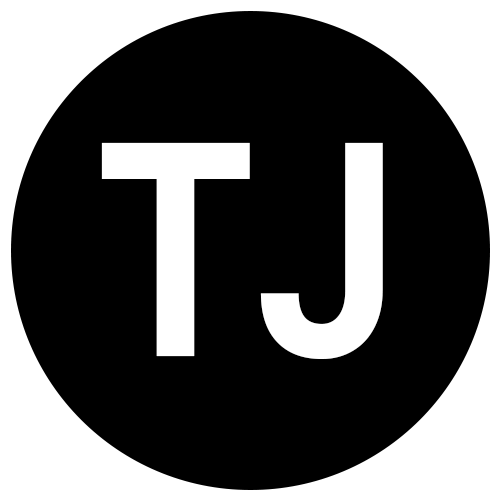
<style>
.page{position:relative;width:500px;height:500px;background:#000000}
.page>*{position:absolute;margin:0}
.t1{font:300px "Roboto-Bold";letter-spacing:0.11em;color:#ffffff;scale:0.85 1}
</style>
<div class="page">
<p class="t1" style="left:101px;top:142px;width:282px;height:217px">TJ</p>
</div>
